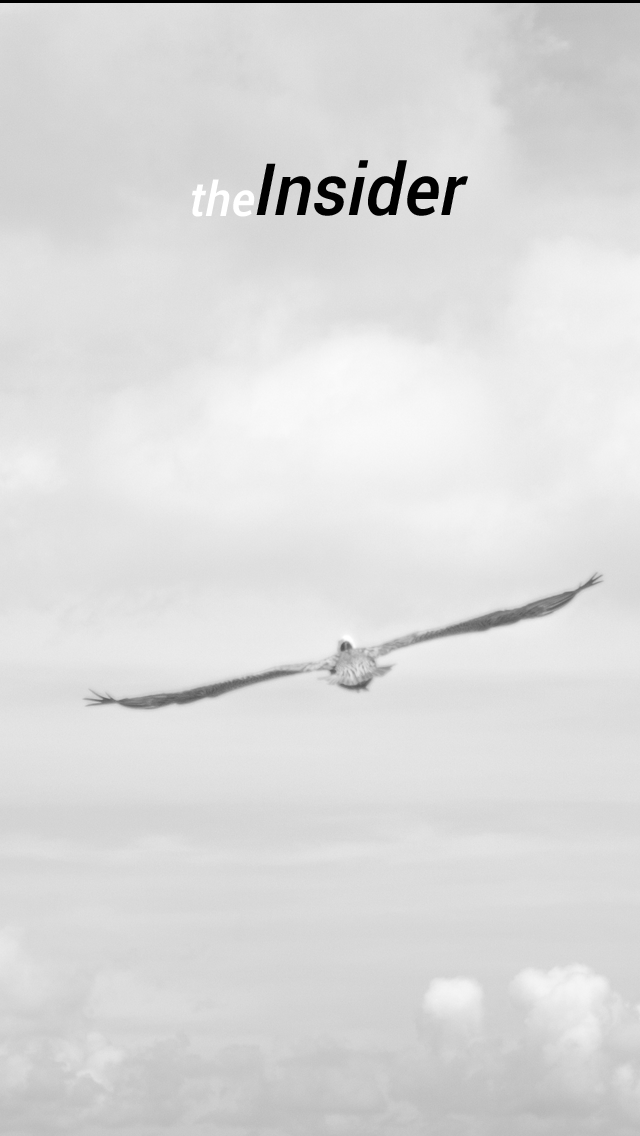
<style>
.page{position:relative;width:640px;height:1136px}
.page>*{position:absolute;margin:0}
.t1{font:72px "Roboto-MediumItalic";color:#000000}
.t2{font:48px "Roboto-MediumItalic";color:#ffffff}
</style>
<div class="page">
<p class="t1" style="left:256px;top:160px;width:212px;height:56px">Insider</p>
<p class="t2" style="left:192px;top:179px;width:63px;height:38px">the</p>
</div>
